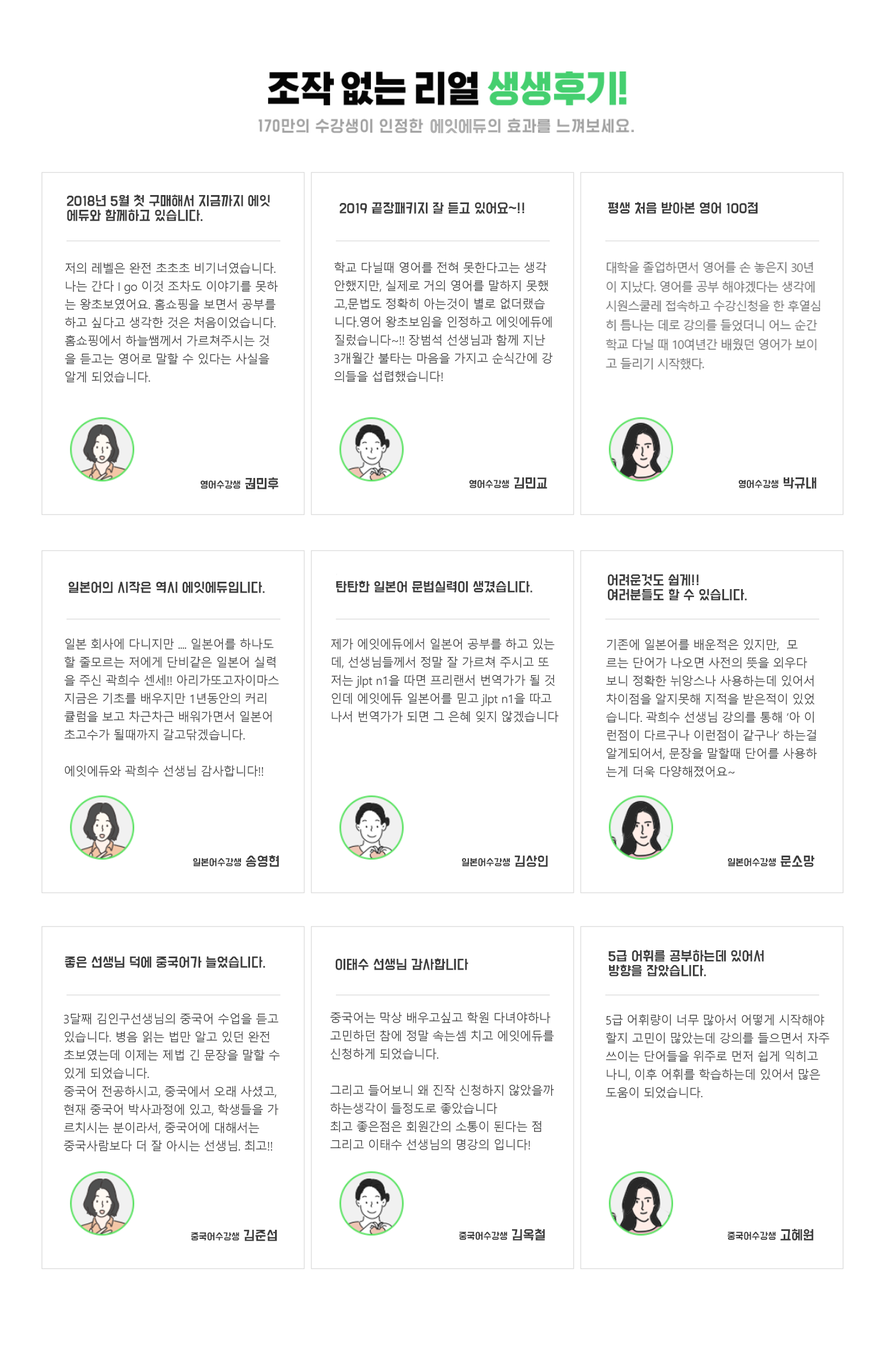
<style>
.page{position:relative;width:884px;height:1350px;background:#ffffff}
.page>*{position:absolute;margin:0}
.t1{font:14.7px "BMDoHyeon";color:#b0b0b0}
.t2{font:11.9px "BMDoHyeon";color:#3e3e3e}
.t3{font:11.9px/18.1px "MalgunGothic";letter-spacing:-0.04em;color:#3e3e3e}
.t4{font:8.5px "BMDoHyeon";color:#3e3e3e}
</style>
<div class="page">
<p class="t1" style="left:430px;top:119px;width:56px;height:14px">에잇에듀</p>
<p class="t2" style="left:67px;top:194px;width:203px;height:27px">2018년 5월 첫 구매해서 지금까지 에잇<br>에듀와 함께하고 있습니다.</p>
<p class="t2" style="left:340px;top:202px;width:184px;height:12px">2019 끝장패키지 잘 듣고 있어요~!!</p>
<p class="t2" style="left:608px;top:202px;width:149px;height:12px">평생 처음 받아본 영어 100점</p>
<p class="t3" style="left:65px;top:262px;width:213px;height:121px">저의 레벨은 완전 초초초 비기너였습니다.<br>나는 간다 I go 이것 조차도 이야기를 못하<br>는 왕초보였어요. 홈쇼핑을 보면서 공부를 <br>하고 싶다고 생각한 것은 처음이었습니다.<br>홈쇼핑에서 하늘쌤께서 가르쳐주시는 것<br>을 듣고는 영어로 말할 수 있다는 사실을<br>알게 되었습니다.</p>
<p class="t3" style="left:334px;top:262px;width:219px;height:120px">학교 다닐때 영어를 전혀 못한다고는 생각<br>안했지만, 실제로 거의 영어를 말하지 못했<br>고,문법도 정확히 아는것이 별로 없더랬습<br>니다.영어 왕초보임을 인정하고 에잇에듀에<br>질렀습니다~!! 장범석 선생님과 함께 지난 <br>3개월간 불타는 마음을 가지고 순식간에 강<br>의들을 섭렵했습니다!</p>
<p class="t4" style="left:200px;top:477px;width:78px;height:12px">영어수강생<span class="t2"> 권민후</span></p>
<p class="t4" style="left:469px;top:477px;width:78px;height:12px">영어수강생<span class="t2"> 김민교</span></p>
<p class="t4" style="left:738px;top:477px;width:78px;height:12px">영어수강생<span class="t2"> 박규내</span></p>
<p class="t2" style="left:69px;top:581px;width:196px;height:12px">일본어의 시작은 역시 에잇에듀입니다.</p>
<p class="t2" style="left:336px;top:580px;width:196px;height:12px">탄탄한 일본어 문법실력이 생겼습니다.</p>
<p class="t2" style="left:608px;top:574px;width:138px;height:26px">어려운것도 쉽게!! <br>여러분들도 할 수 있습니다.</p>
<p class="t3" style="left:64px;top:638px;width:215px;height:138px">일본 회사에 다니지만 .... 일본어를 하나도<br>할 줄모르는 저에게 단비같은 일본어 실력<br>을 주신 곽희수 센세!! 아리가또고자이마스<br>지금은 기초를 배우지만 1년동안의 커리<br>큘럼을 보고 차근차근 배워가면서 일본어 <br>초고수가 될때까지 갈고닦겠습니다.<br><br>에잇에듀와 곽희수 선생님 감사합니다!!</p>
<p class="t3" style="left:330px;top:638px;width:228px;height:84px">제가 에잇에듀에서 일본어 공부를 하고 있는<br>데, 선생님들께서 정말 잘 가르쳐 주시고 또 <br>저는 jlpt n1을 따면 프리랜서 번역가가 될 것<br>인데 에잇에듀 일본어를 믿고 jlpt n1을 따고<br>나서 번역가가 되면 그 은혜 잊지 않겠습니다</p>
<p class="t3" style="left:606px;top:639px;width:211px;height:138px">기존에 일본어를 배운적은 있지만,  모<br>르는 단어가 나오면 사전의 뜻을 외우다<br>보니 정확한 뉘앙스나 사용하는데 있어서<br>차이점을 알지못해 지적을 받은적이 있었<br>습니다. 곽희수 선생님 강의를 통해 ‘아 이<br>런점이 다르구나 이런점이 같구나’ 하는걸<br>알게되어서, 문장을 말할때 단어를 사용하<br>는게 더욱 다양해졌어요~</p>
<p class="t4" style="left:193px;top:855px;width:86px;height:12px">일본어수강생<span class="t2"> 송영현</span></p>
<p class="t4" style="left:461px;top:855px;width:87px;height:12px">일본어수강생<span class="t2"> 김상인</span></p>
<p class="t4" style="left:727px;top:855px;width:87px;height:12px">일본어수강생<span class="t2"> 문소망</span></p>
<p class="t2" style="left:608px;top:949px;width:155px;height:27px">5급 어휘를 공부하는데 있어서 <br>방향을 잡았습니다.</p>
<p class="t2" style="left:65px;top:956px;width:200px;height:11px">좋은 선생님 덕에 중국어가 늘었습니다.</p>
<p class="t2" style="left:336px;top:958px;width:132px;height:12px">이태수 선생님 감사합니다</p>
<p class="t3" style="left:63px;top:1013px;width:216px;height:138px">3달째 김인구선생님의 중국어 수업을 듣고<br>있습니다. 병음 읽는 법만 알고 있던 완전<br>초보였는데 이제는 제법 긴 문장을 말할 수<br>있게 되었습니다.<br>중국어 전공하시고, 중국에서 오래 사셨고, <br>현재 중국어 박사과정에 있고, 학생들을 가<br>르치시는 분이라서, 중국어에 대해서는 <br>중국사람보다 더 잘 아시는 선생님. 최고!!</p>
<p class="t3" style="left:330px;top:1012px;width:224px;height:138px">중국어는 막상 배우고싶고 학원 다녀야하나<br>고민하던 참에 정말 속는셈 치고 에잇에듀를<br>신청하게 되었습니다.<br><br>그리고 들어보니 왜 진작 신청하지 않았을까<br>하는생각이 들정도로 좋았습니다<br>최고 좋은점은 회원간의 소통이 된다는 점<br>그리고 이태수 선생님의 명강의 입니다!</p>
<p class="t3" style="left:605px;top:1014px;width:224px;height:84px">5급 어휘량이 너무 많아서 어떻게 시작해야 <br>할지 고민이 많았는데 강의를 들으면서 자주<br>쓰이는 단어들을 위주로 먼저 쉽게 익히고<br>나니, 이후 어휘를 학습하는데 있어서 많은<br>도움이 되었습니다.</p>
<p class="t4" style="left:191px;top:1229px;width:86px;height:12px">중국어수강생<span class="t2"> 김준섭</span></p>
<p class="t4" style="left:459px;top:1228px;width:86px;height:12px">중국어수강생<span class="t2"> 김옥철</span></p>
<p class="t4" style="left:727px;top:1228px;width:86px;height:12px">중국어수강생<span class="t2"> 고혜원</span></p>
</div>
